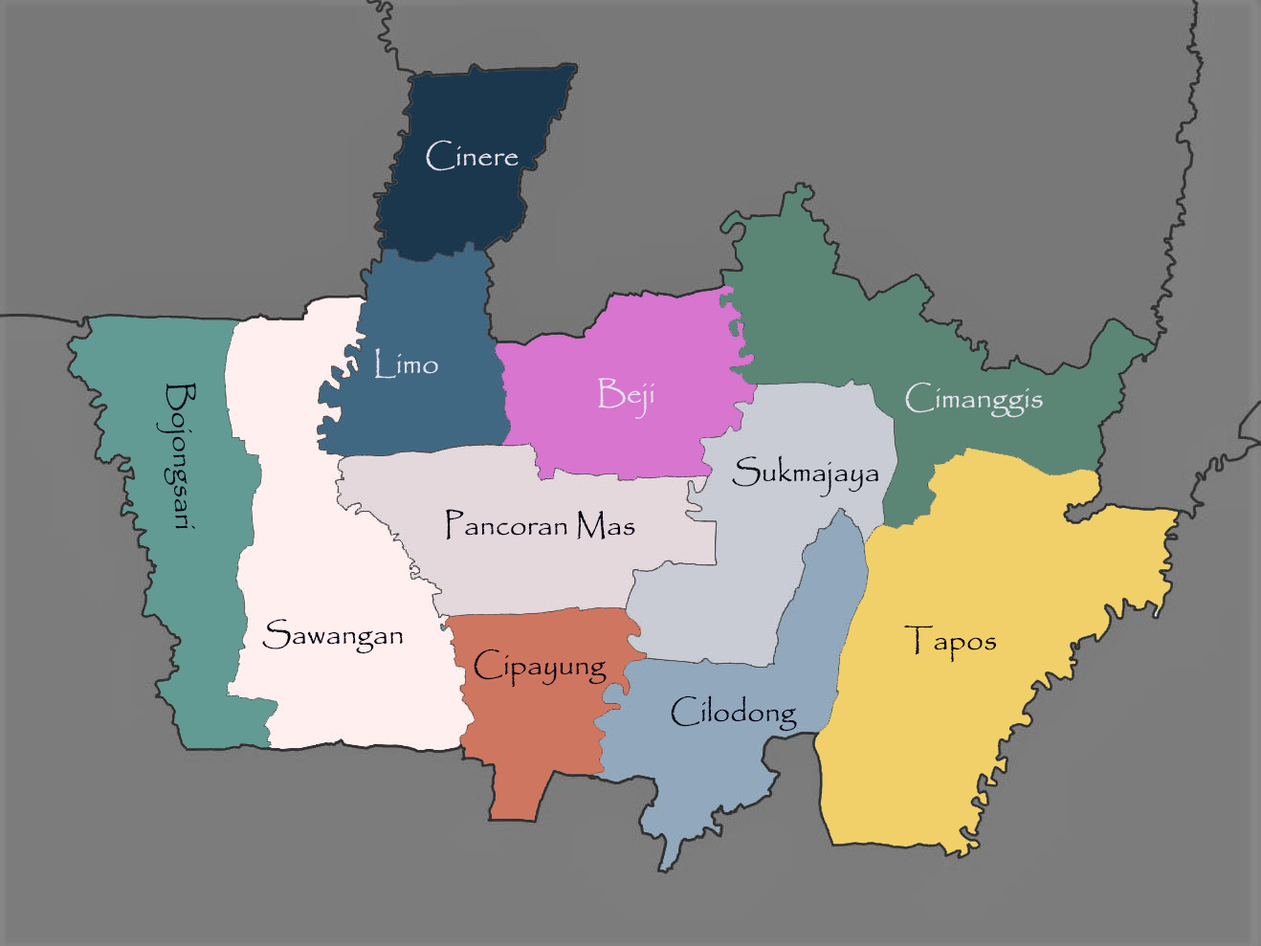
<style>
.page{position:relative;width:1261px;height:946px;background:#787878}
.page>*{position:absolute;margin:0}
.t1{font:30.6px "Papyrus-Regular";color:#e3e1ed}
.t2{font:30.6px "Papyrus-Regular";color:#050214}
</style>
<div class="page">
<p class="t1" style="left:426px;top:140px;width:92px;height:31px">Cinere</p>
<p class="t1" style="left:375px;top:348px;width:63px;height:31px">Limo</p>
<p class="t1" style="left:598px;top:378px;width:56px;height:41px">Beji</p>
<p class="t2" style="left:156px;top:383px;width:40px;height:146px;rotate:88deg">Bojongsari</p>
<p class="t1" style="left:905px;top:382px;width:138px;height:36px">Cimanggis</p>
<p class="t2" style="left:732px;top:455px;width:146px;height:42px">Sukmajaya</p>
<p class="t2" style="left:446px;top:509px;width:189px;height:31px">Pancoran Mas</p>
<p class="t2" style="left:262px;top:619px;width:141px;height:35px">Sawangan</p>
<p class="t2" style="left:904px;top:625px;width:93px;height:38px">Tapos</p>
<p class="t2" style="left:473px;top:648px;width:133px;height:40px">Cipayung</p>
<p class="t2" style="left:670px;top:695px;width:127px;height:37px">Cilodong</p>
</div>
